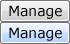
<style>
.page{position:relative;width:70px;height:44px}
.page>*{position:absolute;margin:0}
.t1{font:14px "Verdana";color:#000000}
</style>
<div class="page">
<p class="t1" style="left:9px;top:5px;width:53px;height:14px">Manage</p>
<p class="t1" style="left:9px;top:27px;width:53px;height:14px">Manage</p>
</div>
